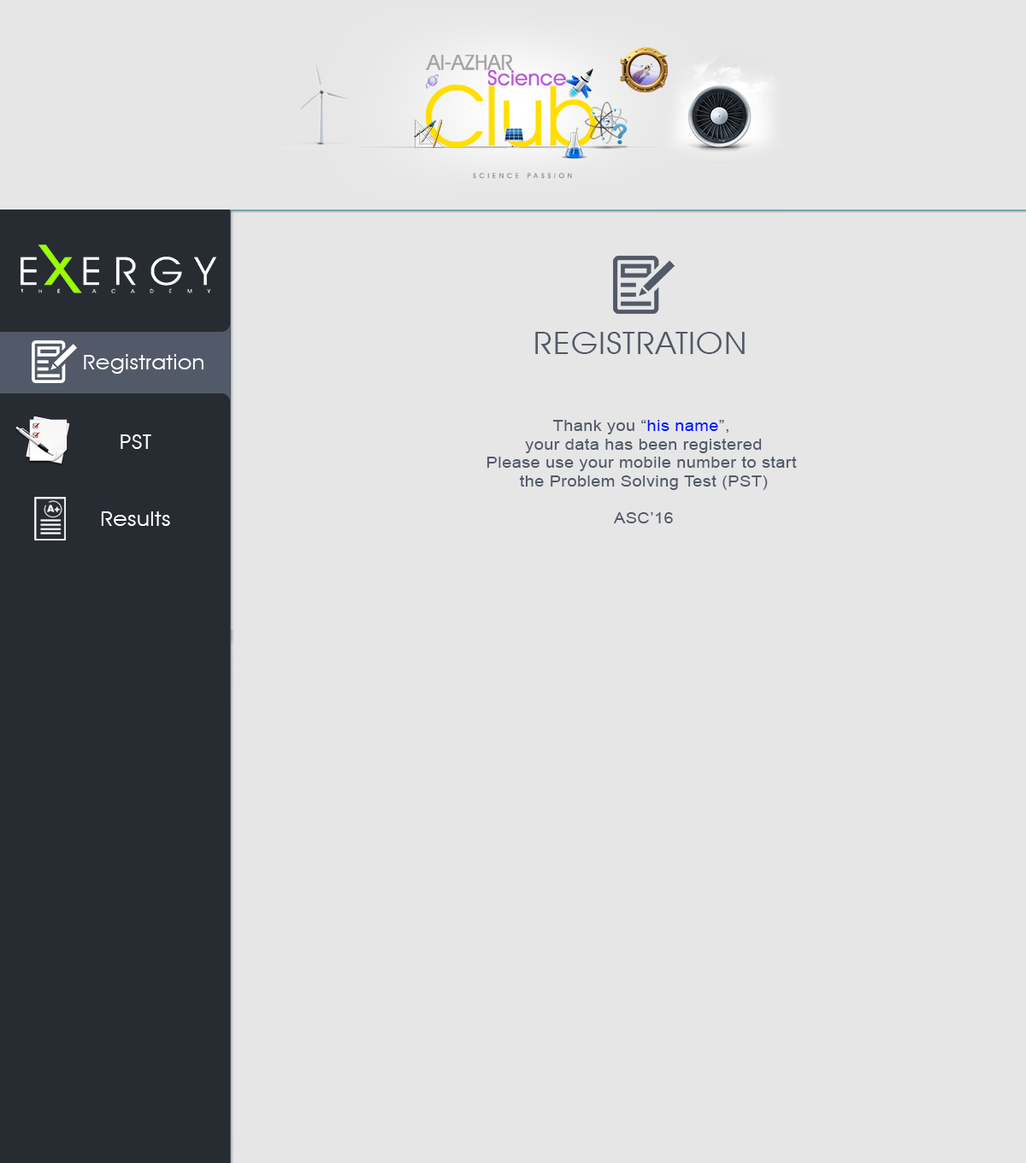
<style>
.page{position:relative;width:1026px;height:1163px;background:#e6e6e6}
.page>*{position:absolute;margin:0}
.t1{font:30.8px "AvantGardeITCbyBT-Book";letter-spacing:0.025em;color:#525a69;text-transform:uppercase;scale:1.1 1}
.t2{font:20.5px "AvantGardeITCbyBT-Book";letter-spacing:0.025em;color:#ffffff;scale:1.1 1}
.t3{font:15.4px "ArialMT";letter-spacing:0.025em;color:#525a69;scale:1.1 1}
.t4{font:15.4px "ArialMT";letter-spacing:0.025em;color:#0018ff;scale:1.1 1}
</style>
<div class="page">
<p class="t1" style="left:535px;top:332px;width:210px;height:22px">Registration</p>
<p class="t2" style="left:84px;top:354px;width:119px;height:20px">Registration</p>
<p class="t3" style="left:486px;top:420px;width:311px;height:103px;text-align:center">Thank you “<span class="t4">his name</span>”, <br>your data has been registered<br>Please use your mobile number to start <br>the Problem Solving Test (PST)<br><br>ASC’16</p>
<p class="t2" style="left:121px;top:434px;width:30px;height:15px">PST</p>
<p class="t2" style="left:101px;top:511px;width:69px;height:15px">Results</p>
</div>
